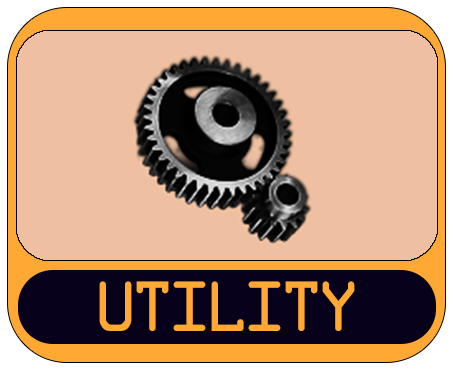
<style>
.page{position:relative;width:453px;height:370px;background:#eec0a1}
.page>*{position:absolute;margin:0}
.t1{font:76.2px "DataControlUnifon";color:#ffa833}
</style>
<div class="page">
<p class="t1" style="left:99px;top:281px;width:256px;height:50px">utility</p>
</div>
